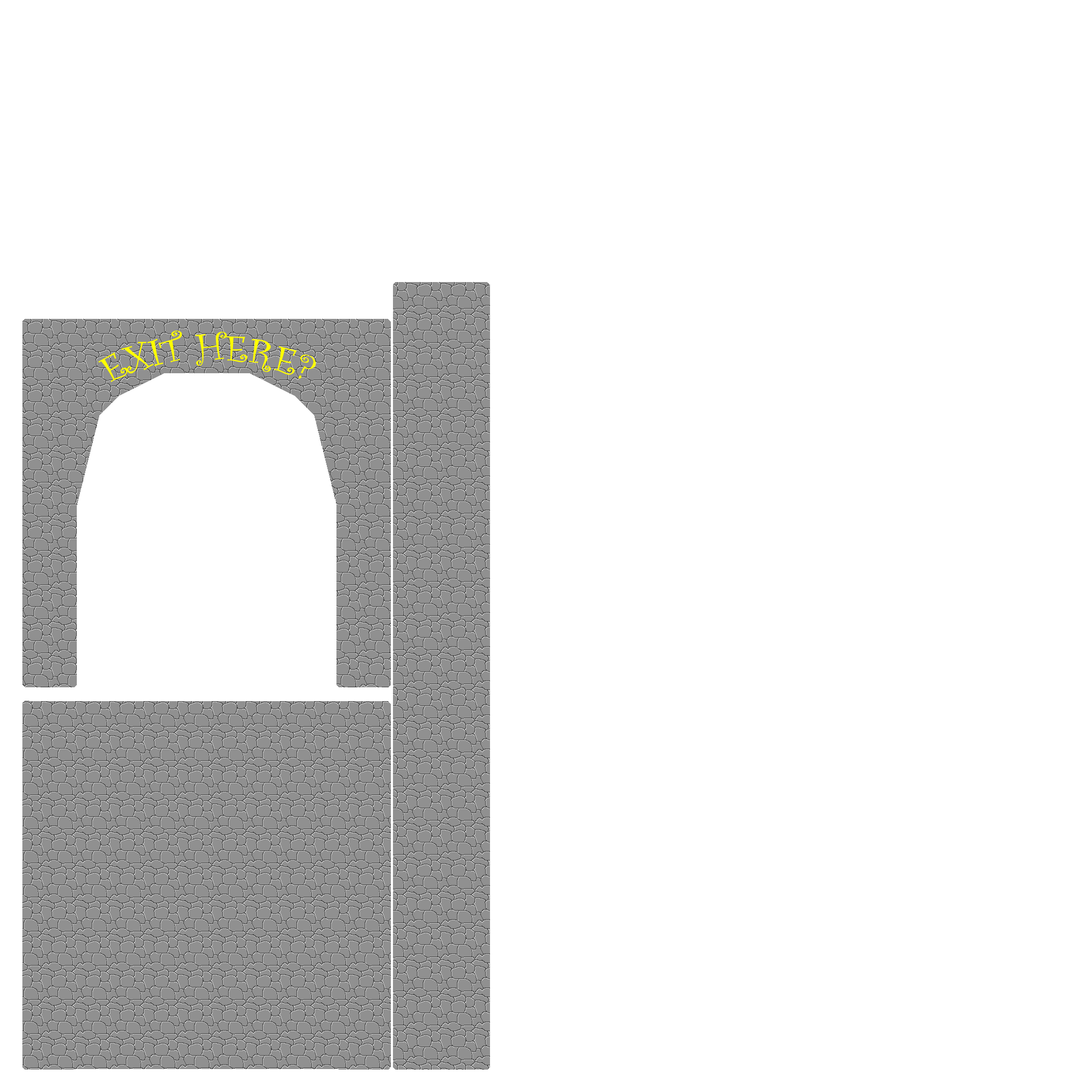
<style>
.page{position:relative;width:1092px;height:1092px;background:#ffffff}
.page>*{position:absolute;margin:0}
.t1{font:38.4px "CurlzMT";color:#ffff00}
</style>
<div class="page">
<p class="t1" style="left:98px;top:331px;width:218px;height:51px">EXIT HERE?</p>
</div>
